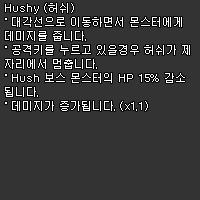
<style>
.page{position:relative;width:200px;height:200px;background:#333333}
.page>*{position:absolute;margin:0}
.t1{font:11px/14px "Dotum";color:#ffffff}
</style>
<div class="page">
<p class="t1" style="left:5px;top:3px;width:185px;height:108px">Hushy (허쉬)<br>˚ 대각선으로 이동하면서 몬스터에게<br>데미지를 줍니다.<br>˚ 공격키를 누르고 있을경우 허쉬가 제<br>자리에서 멈춥니다.<br>˚ Hush 보스 몬스터의 HP 15% 감소<br>됩니다.<br>˚ 데미지가 증가됩니다. (x1.1)</p>
</div>
